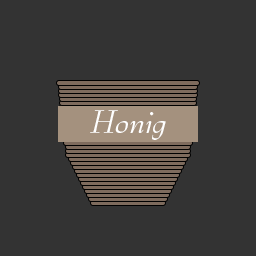
<style>
.page{position:relative;width:256px;height:256px;background:#333333}
.page>*{position:absolute;margin:0}
.t1{font:36px "BernhardModernStd-Italic";color:#ffffff}
</style>
<div class="page">
<p class="t1" style="left:90px;top:110px;width:76px;height:30px">Honig</p>
</div>
